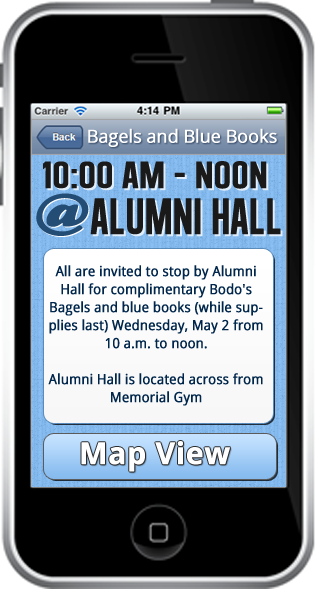
<style>
.page{position:relative;width:321px;height:589px;background:#000000}
.page>*{position:absolute;margin:0}
.t1{font:18px "OpenSans";letter-spacing:-0.025em;color:#ffffff;font-weight:bold}
.t2{font:38.4px "AlegreSans";color:#1a1a1a;font-weight:bold;scale:1.25 1}
.t3{font:57.6px "CooperBlackStd";color:#244d75;font-weight:bold;scale:1.25 1}
.t4{font:52px "AlegreSans";color:#1a1a1a;font-weight:bold}
.t5{font:14px/18px "OpenSans";color:#00264b;font-weight:bold;scale:0.92 1}
.t6{font:30px "OpenSans-Bold";color:#ffffff;font-weight:bold}
</style>
<div class="page">
<p class="t1" style="left:88px;top:128px;width:189px;height:19px">Bagels and Blue Books</p>
<p class="t2" style="left:43px;top:161px;width:224px;height:28px">10:00 AM - Noon</p>
<p class="t3" style="left:36px;top:193px;width:53px;height:43px">@</p>
<p class="t4" style="left:90px;top:198px;width:191px;height:37px">Alumni Hall</p>
<p class="t5" style="left:48px;top:265px;width:215px;height:141px;text-align:center">All are invited to stop by Alumni Hall for complimentary Bodo's Bagels and blue books (while supplies last) Wednesday, May 2 from 10 a.m. to noon. <br><br>Alumni Hall is located across from Memorial Gym</p>
<p class="t6" style="left:81px;top:441px;width:149px;height:31px">Map View</p>
</div>
